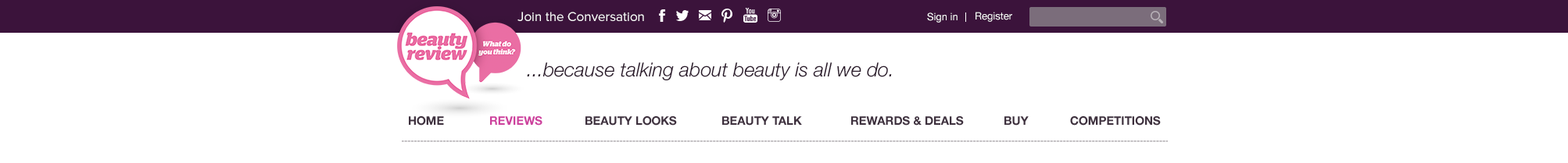
<style>
.page{position:relative;width:1568px;height:163px;background:#ffffff}
.page>*{position:absolute;margin:0}
.t1{font:13.3px "ProximaNova-Regular";color:#ffffff}
.t2{font:10.2px "HelveticaNeue";color:#ffffff}
.t3{font:10.2px "HelveticaNeue";color:#f7f7f7}
.t4{font:19.5px "HelveticaNeue-LightItalic";color:#291b29}
.t5{font:11.7px "HelveticaNeue-Bold";color:#3e313e}
.t6{font:11.7px "HelveticaNeue-Bold";color:#cc419c}
</style>
<div class="page">
<p class="t1" style="left:517px;top:12px;width:127px;height:9px">Join the Conversation</p>
<p class="t2" style="left:927px;top:13px;width:31px;height:10px">Sign in</p>
<p class="t3" style="left:976px;top:12px;width:36px;height:10px">Register</p>
<p class="t4" style="left:527px;top:63px;width:365px;height:18px">...because talking about beauty is all we do.</p>
<p class="t5" style="left:409px;top:116px;width:35px;height:10px">HOME</p>
<p class="t6" style="left:490px;top:116px;width:52px;height:10px">REVIEWS</p>
<p class="t5" style="left:585px;top:116px;width:92px;height:10px">BEAUTY LOOKS</p>
<p class="t5" style="left:722px;top:116px;width:80px;height:10px">BEAUTY TALK</p>
<p class="t5" style="left:851px;top:116px;width:113px;height:10px">REWARDS &amp; DEALS</p>
<p class="t5" style="left:1004px;top:116px;width:25px;height:10px">BUY</p>
<p class="t5" style="left:1070px;top:116px;width:91px;height:10px">COMPETITIONS</p>
</div>
